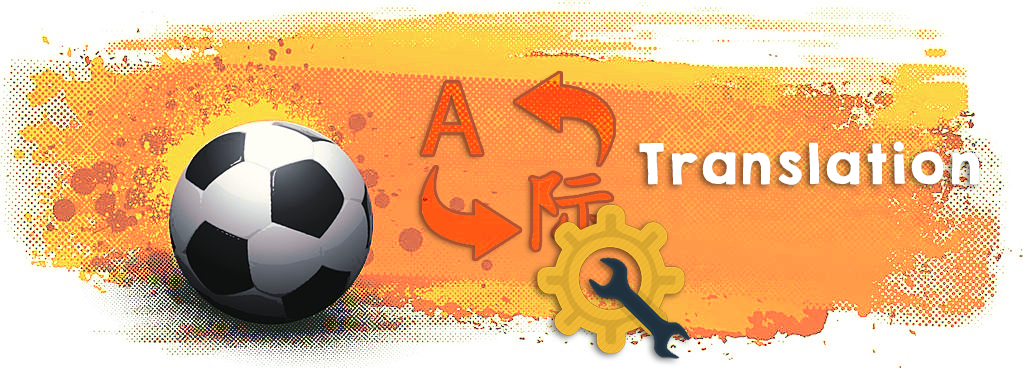
<style>
.page{position:relative;width:1023px;height:368px}
.page>*{position:absolute;margin:0}
.t1{font:50px "KGHAPPYSolid";color:#ffffff}
</style>
<div class="page">
<p class="t1" style="left:639px;top:141px;width:341px;height:44px">Translation</p>
</div>
